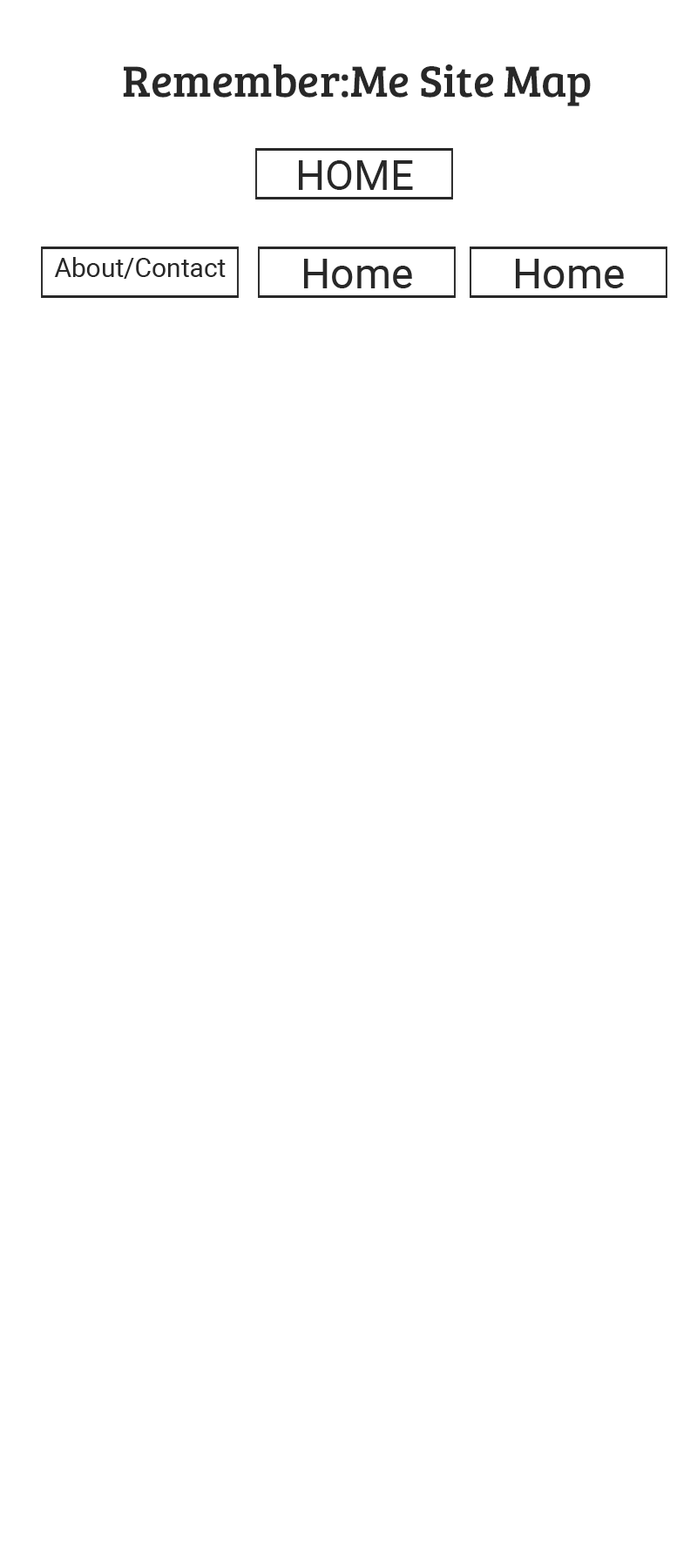
<style>
.page{position:relative;width:697px;height:1568px;background:#ffffff}
.page>*{position:absolute;margin:0}
.t1{font:45.1px "BreeSerif-Regular";color:#282828}
.t2{font:41.8px "Roboto-Regular";color:#282828}
.t3{font:26.1px "Roboto-Regular";color:#282828}
</style>
<div class="page">
<p class="t1" style="left:123px;top:64px;width:468px;height:42px">Remember:Me Site Map</p>
<p class="t2" style="left:299px;top:160px;width:114px;height:30px">HOME</p>
<p class="t3" style="left:54px;top:257px;width:172px;height:22px">About/Contact</p>
<p class="t2" style="left:304px;top:259px;width:108px;height:29px">Home</p>
<p class="t2" style="left:516px;top:259px;width:108px;height:29px">Home</p>
</div>
